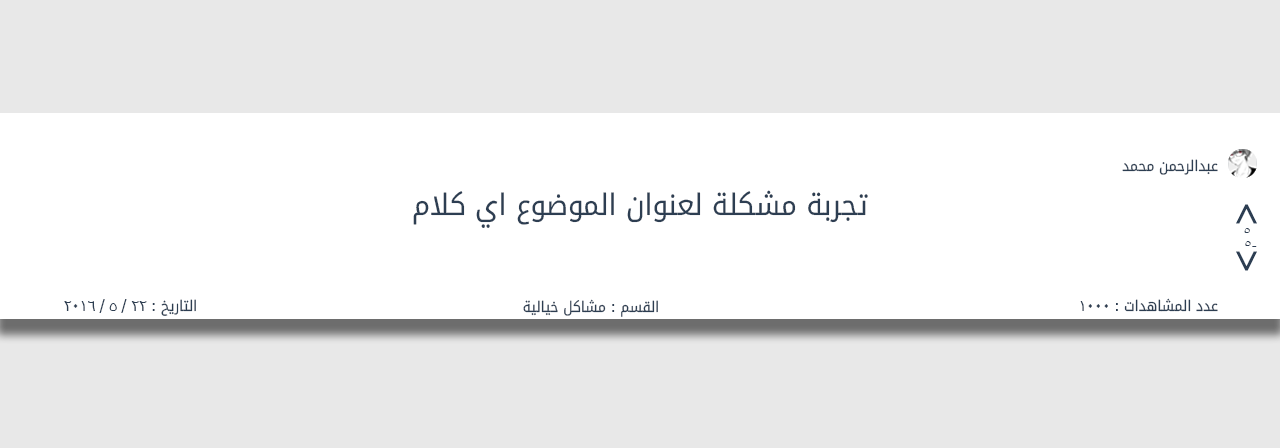
<style>
.page{position:relative;width:1280px;height:448px;background:#e8e8e8}
.page>*{position:absolute;margin:0}
.t1{font:14.7px "DroidArabicKufi";color:#2d3e52;scale:0.94 1}
.t2{font:29.4px "DroidArabicKufi";color:#2d3e52;scale:0.94 1}
.t3{font:15.8px "TimesNewRomanPSMT";color:#2d3e52;scale:0.94 1}
.t4{font:14.7px "Tahoma";color:#2d3e52;scale:0.94 1}
</style>
<div class="page">
<p class="t1" style="left:1122px;top:159px;width:96px;height:16px">عبدالرحمن محمد</p>
<p class="t2" style="left:413px;top:190px;width:455px;height:38px">تجربة مشكلة لعنوان الموضوع اي كلام</p>
<p class="t3" style="left:1244px;top:228px;width:6px;height:5px">5</p>
<p class="t3" style="left:1245px;top:241px;width:12px;height:6px">-5</p>
<p class="t4" style="left:64px;top:299px;width:132px;height:17px"><span class="t1">التاريخ </span>: 22 / 5 / 2016</p>
<p class="t1" style="left:523px;top:299px;width:135px;height:18px">القسم <span class="t4">:</span> مشاكل خيالية</p>
<p class="t1" style="left:1080px;top:298px;width:138px;height:14px">عدد المشاهدات <span class="t4">: 1000</span></p>
</div>
